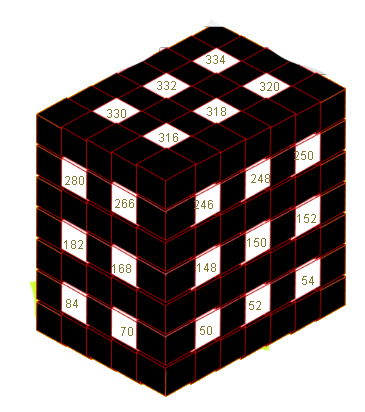
<style>
.page{position:relative;width:365px;height:412px;background:#ffffff}
.page>*{position:absolute;margin:0}
.t1{font:12px "ArialMT";color:#817931}
</style>
<div class="page">
<p class="t1" style="left:206px;top:55px;width:19px;height:9px">334</p>
<p class="t1" style="left:157px;top:81px;width:19px;height:9px">332</p>
<p class="t1" style="left:260px;top:82px;width:19px;height:9px">320</p>
<p class="t1" style="left:107px;top:109px;width:19px;height:9px">330</p>
<p class="t1" style="left:207px;top:107px;width:19px;height:9px">318</p>
<p class="t1" style="left:159px;top:133px;width:19px;height:9px">316</p>
<p class="t1" style="left:294px;top:151px;width:19px;height:9px">250</p>
<p class="t1" style="left:251px;top:174px;width:19px;height:9px">248</p>
<p class="t1" style="left:65px;top:176px;width:19px;height:9px">280</p>
<p class="t1" style="left:115px;top:199px;width:19px;height:9px">266</p>
<p class="t1" style="left:194px;top:200px;width:19px;height:9px">246</p>
<p class="t1" style="left:297px;top:214px;width:19px;height:9px">152</p>
<p class="t1" style="left:64px;top:240px;width:19px;height:9px">182</p>
<p class="t1" style="left:247px;top:238px;width:19px;height:9px">150</p>
<p class="t1" style="left:112px;top:264px;width:19px;height:9px">168</p>
<p class="t1" style="left:197px;top:263px;width:19px;height:9px">148</p>
<p class="t1" style="left:302px;top:276px;width:12px;height:9px">54</p>
<p class="t1" style="left:66px;top:299px;width:12px;height:9px">84</p>
<p class="t1" style="left:249px;top:301px;width:12px;height:9px">52</p>
<p class="t1" style="left:121px;top:327px;width:12px;height:9px">70</p>
<p class="t1" style="left:200px;top:326px;width:12px;height:9px">50</p>
</div>
